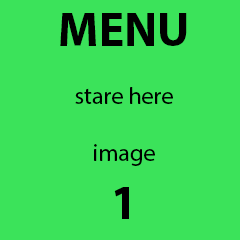
<style>
.page{position:relative;width:240px;height:240px;background:#3be35a}
.page>*{position:absolute;margin:0}
.t1{font:24px "MyriadPro-Regular";color:#000000}
.t2{font:48px "MyriadPro-Bold";color:#000000}
</style>
<div class="page">
<p class="t1" style="left:60px;top:13px;width:127px;height:206px;text-align:center"><span class="t2">MENU<br></span><br>stare here<br><br>image <br><span class="t2">1</span></p>
</div>
